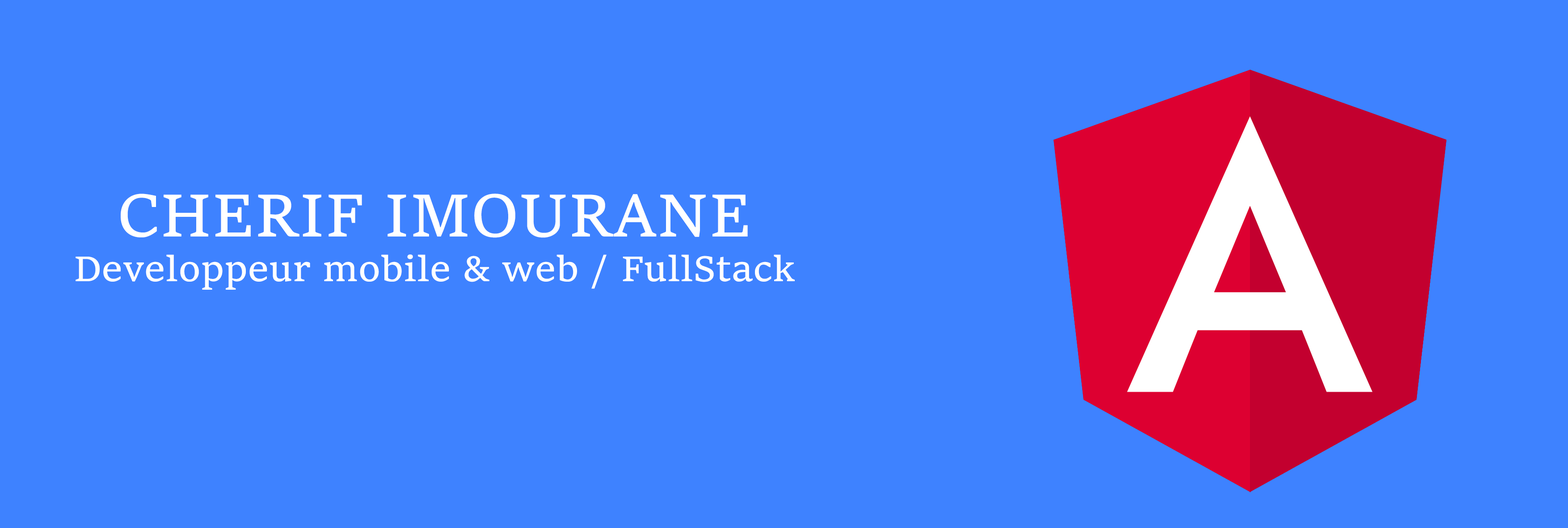
<style>
.page{position:relative;width:1568px;height:528px;background:#3e82ff}
.page>*{position:absolute;margin:0}
.t1{font:37.2px "Sitka-Small";color:#ffffff}
.t2{font:63.2px "Sitka-Small";color:#ffffff}
</style>
<div class="page">
<p class="t1" style="left:76px;top:194px;width:719px;height:96px;text-align:center"><span class="t2">CHERIF IMOURANE<br></span>Developpeur mobile &amp; web / FullStack</p>
</div>
